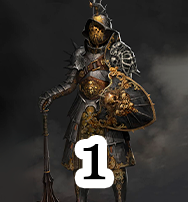
<style>
.page{position:relative;width:188px;height:202px}
.page>*{position:absolute;margin:0}
.t1{font:64.7px "Georgia";color:#000000}
</style>
<div class="page">
<p class="t1" style="left:83px;top:144px;width:23px;height:36px">1</p>
</div>
